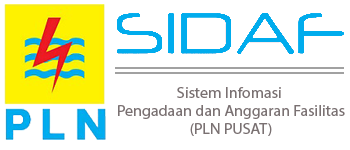
<style>
.page{position:relative;width:350px;height:150px;background:#ffffff}
.page>*{position:absolute;margin:0}
.t1{font:15.2px "MyriadPro-Regular";color:#7a7172;scale:1.05 1}
</style>
<div class="page">
<p class="t1" style="left:118px;top:87px;width:227px;height:49px;text-align:center">Sistem Infomasi <br>Pengadaan dan Anggaran Fasilitas<br>(PLN PUSAT)</p>
</div>
